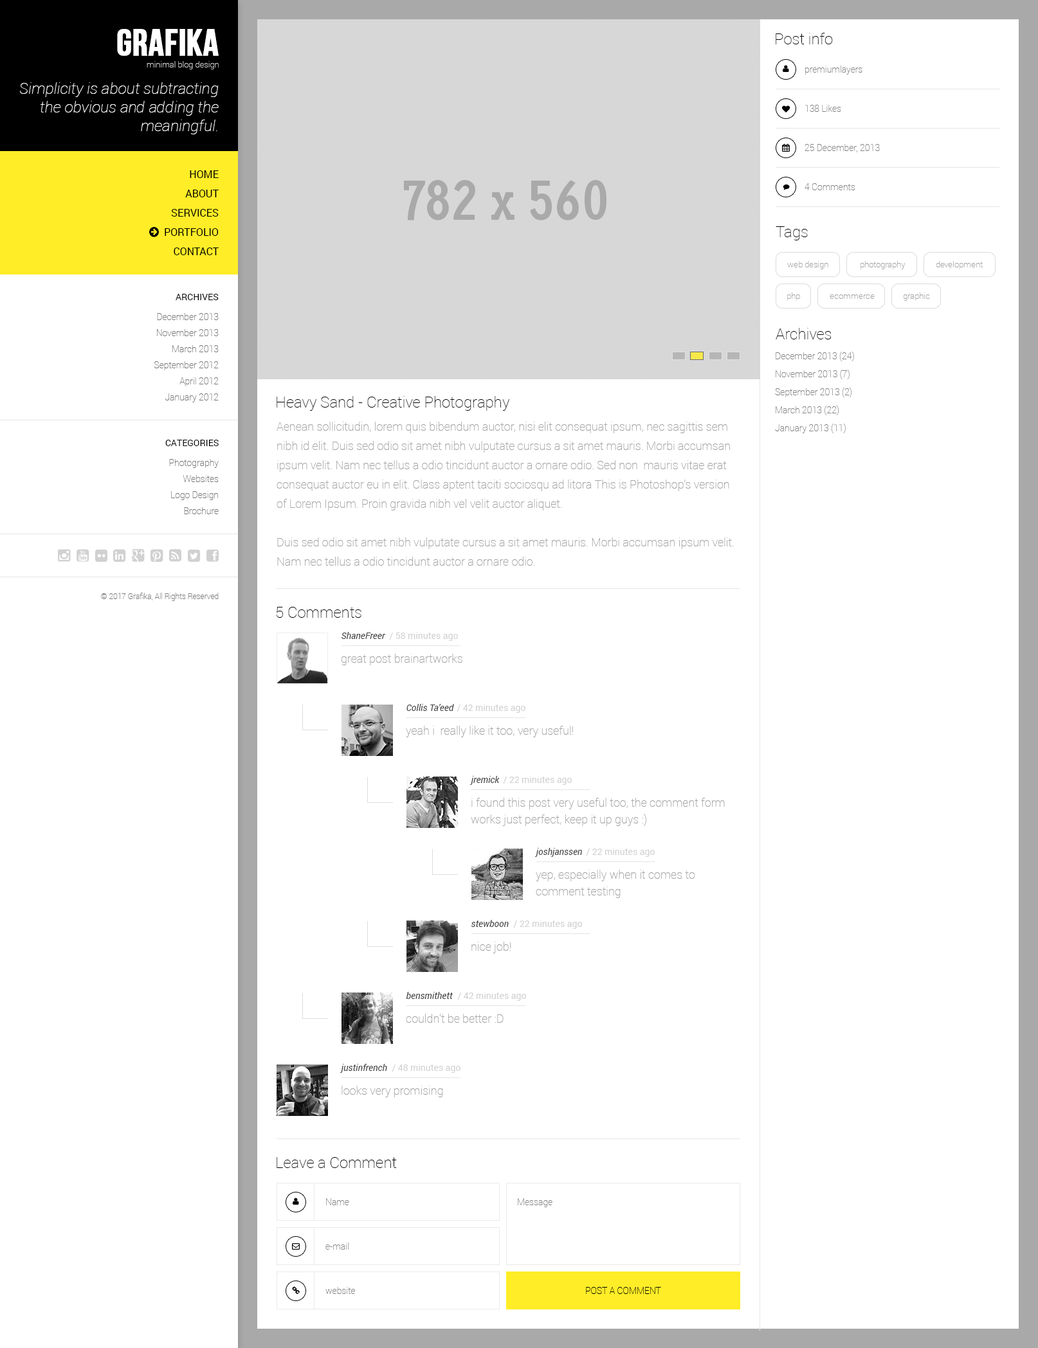
<style>
.page{position:relative;width:1038px;height:1348px;background:#ffffff}
.page>*{position:absolute;margin:0}
.t1{font:37.3px "BebasNeue";color:#ffffff;text-transform:uppercase;font-weight:bold}
.t2{font:15.4px "Roboto-Thin";color:#000000}
.t3{font:8.4px "Roboto-Thin";color:#cacaca}
.t4{font:9px "Roboto-Thin";color:#848484}
.t5{font:15.4px "Roboto-ThinItalic";color:#ffffff}
.t6{font:10.3px/19.3px "Roboto-Regular";color:#000000;text-transform:uppercase}
.t7{font:8.4px "Roboto-Thin";color:#a3a3a3}
.t8{font:9px "Roboto-Regular";color:#000000;text-transform:uppercase}
.t9{font:9px/16.1px "Roboto-Thin";color:#787878}
.t10{font:9px/18px "Roboto-Thin";color:#848484}
.t11{font:11.6px/19.3px "Roboto-Thin";color:#a3a3a3}
.t12{font:7.7px "Roboto-Thin";color:#787878}
.t13{font:9px "Roboto-Italic";color:#3c3c3c}
.t14{font:9px "Roboto-Regular";color:#d1d1d1}
.t15{font:11.6px "Roboto-Thin";color:#a3a3a3}
.t16{font:11.6px/16.7px "Roboto-Thin";color:#a3a3a3}
.t17{font:9px "Roboto-Thin";color:#000000;text-transform:uppercase}
</style>
<div class="page">
<p class="t1" style="left:117px;top:29px;width:102px;height:27px">Grafika</p>
<p class="t2" style="left:775px;top:33px;width:58px;height:11px">Post info</p>
<p class="t3" style="left:147px;top:61px;width:72px;height:8px">minimal blog design</p>
<p class="t4" style="left:805px;top:66px;width:57px;height:9px">premiumlayers</p>
<p class="t5" style="left:20px;top:82px;width:199px;height:52px;text-align:right">Simplicity is about subtracting the obvious and adding the meaningful.</p>
<p class="t4" style="left:805px;top:105px;width:36px;height:7px">138 Likes</p>
<p class="t4" style="left:804px;top:144px;width:75px;height:8px">25 December, 2013</p>
<p class="t6" style="left:165px;top:170px;width:54px;height:85px;text-align:right">Home<br>About<br>Services<br>Portfolio<br>Contact</p>
<p class="t4" style="left:804px;top:183px;width:51px;height:7px">4 Comments</p>
<p class="t2" style="left:775px;top:226px;width:32px;height:14px">Tags</p>
<p class="t7" style="left:787px;top:261px;width:41px;height:8px">web design</p>
<p class="t7" style="left:860px;top:261px;width:45px;height:8px">photography</p>
<p class="t7" style="left:935px;top:261px;width:47px;height:8px">development</p>
<p class="t8" style="left:176px;top:294px;width:43px;height:6px">Archives</p>
<p class="t7" style="left:787px;top:292px;width:13px;height:9px">php</p>
<p class="t7" style="left:903px;top:292px;width:27px;height:9px">graphic</p>
<p class="t7" style="left:829px;top:294px;width:45px;height:5px">ecommerce</p>
<p class="t9" style="left:154px;top:313px;width:65px;height:89px;text-align:right">December 2013<br>November 2013<br>March 2013<br>September 2012<br>April 2012<br>January 2012</p>
<p class="t2" style="left:775px;top:328px;width:56px;height:11px">Archives</p>
<p class="t10" style="left:775px;top:352px;width:79px;height:81px">December 2013 (24)<br>November 2013 (7)<br>September 2013 (2)<br>March 2013 (22)<br>January 2013 (11)</p>
<p class="t2" style="left:276px;top:396px;width:234px;height:15px">Heavy Sand - Creative Photography</p>
<p class="t11" style="left:276px;top:422px;width:458px;height:144px">Aenean sollicitudin, lorem quis bibendum auctor, nisi elit consequat ipsum, nec sagittis sem nibh id elit. Duis sed odio sit amet nibh vulputate cursus a sit amet mauris. Morbi accumsan ipsum velit. Nam nec tellus a odio tincidunt auctor a ornare odio. Sed non  mauris vitae erat consequat auctor eu in elit. Class aptent taciti sociosqu ad litora This is Photoshop's version  of Lorem Ipsum. Proin gravida nibh vel velit auctor aliquet.<br><br>Duis sed odio sit amet nibh vulputate cursus a sit amet mauris. Morbi accumsan ipsum velit. Nam nec tellus a odio tincidunt auctor a ornare odio.</p>
<p class="t8" style="left:165px;top:440px;width:54px;height:6px">Categories</p>
<p class="t9" style="left:169px;top:459px;width:50px;height:55px;text-align:right">Photography<br>Websites<br>Logo Design<br>Brochure</p>
<p class="t12" style="left:101px;top:593px;width:118px;height:8px">© 2017 Grafika, All Rights Reserved</p>
<p class="t2" style="left:276px;top:607px;width:85px;height:11px">5 Comments</p>
<p class="t13" style="left:341px;top:632px;width:45px;height:7px">ShaneFreer</p>
<p class="t14" style="left:389px;top:632px;width:69px;height:9px">/ 58 minutes ago</p>
<p class="t15" style="left:341px;top:654px;width:121px;height:11px">great post brainartworks</p>
<p class="t13" style="left:406px;top:704px;width:48px;height:7px">Collis Ta’eed</p>
<p class="t14" style="left:456px;top:704px;width:69px;height:9px">/ 42 minutes ago</p>
<p class="t15" style="left:406px;top:726px;width:167px;height:11px">yeah i  really like it too, very useful!</p>
<p class="t13" style="left:470px;top:776px;width:30px;height:9px">jremick</p>
<p class="t14" style="left:503px;top:776px;width:69px;height:9px">/ 22 minutes ago</p>
<p class="t16" style="left:471px;top:798px;width:253px;height:28px">i found this post very useful too, the comment form<br>works just perfect, keep it up guys :)</p>
<p class="t13" style="left:535px;top:848px;width:47px;height:9px">joshjanssen</p>
<p class="t14" style="left:586px;top:848px;width:68px;height:9px">/ 22 minutes ago</p>
<p class="t16" style="left:536px;top:870px;width:159px;height:28px">yep, especially when it comes to <br>comment testing</p>
<p class="t13" style="left:471px;top:920px;width:38px;height:7px">stewboon</p>
<p class="t14" style="left:513px;top:920px;width:69px;height:9px">/ 22 minutes ago</p>
<p class="t15" style="left:471px;top:942px;width:39px;height:11px">nice job!</p>
<p class="t13" style="left:406px;top:992px;width:47px;height:7px">bensmithett</p>
<p class="t14" style="left:457px;top:992px;width:69px;height:9px">/ 42 minutes ago</p>
<p class="t15" style="left:406px;top:1014px;width:97px;height:9px">couldn’t be better :D</p>
<p class="t13" style="left:340px;top:1064px;width:47px;height:9px">justinfrench</p>
<p class="t14" style="left:392px;top:1064px;width:68px;height:9px">/ 48 minutes ago</p>
<p class="t15" style="left:341px;top:1086px;width:102px;height:11px">looks very promising</p>
<p class="t2" style="left:276px;top:1157px;width:121px;height:11px">Leave a Comment</p>
<p class="t4" style="left:326px;top:1198px;width:23px;height:7px">Name</p>
<p class="t4" style="left:518px;top:1198px;width:34px;height:9px">Message</p>
<p class="t4" style="left:325px;top:1243px;width:23px;height:7px">e-mail</p>
<p class="t4" style="left:325px;top:1287px;width:31px;height:7px">website</p>
<p class="t17" style="left:586px;top:1287px;width:75px;height:7px">Post a Comment</p>
</div>
